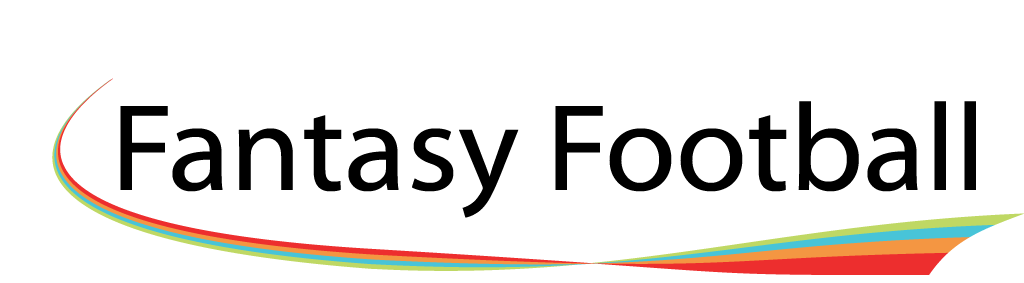
<style>
.page{position:relative;width:1024px;height:283px;background:#ffffff}
.page>*{position:absolute;margin:0}
.t1{font:124.5px "MyriadWebPro";color:#000000}
</style>
<div class="page">
<p class="t1" style="left:120px;top:101px;width:856px;height:117px">Fantasy Football</p>
</div>
